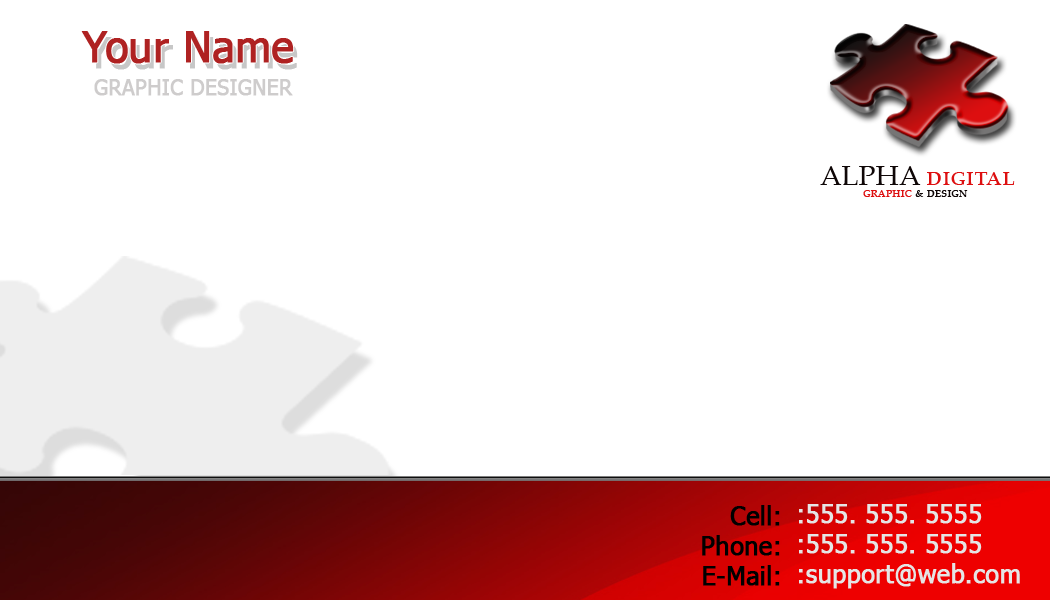
<style>
.page{position:relative;width:1050px;height:600px;background:#ffffff}
.page>*{position:absolute;margin:0}
.t1{font:41.7px "Tahoma";color:#af2222;font-weight:bold}
.t2{font:20.8px "Tahoma";color:#cecccc;font-weight:bold}
.t3{font:27.9px "PalatinoLinotype-Roman";color:#dd0f10;font-variant:small-caps}
.t4{font:27.9px "PalatinoLinotype-Roman";color:#0f0707;font-variant:small-caps}
.t5{font:14px "PalatinoLinotype-Roman";color:#0f0707;font-variant:small-caps}
.t6{font:14px "PalatinoLinotype-Roman";color:#dd0f10;font-variant:small-caps}
.t7{font:25px "Tahoma";color:#000000;font-weight:bold}
.t8{font:25px "Tahoma";color:#e5e5e5;font-weight:bold}
</style>
<div class="page">
<p class="t1" style="left:81px;top:31px;width:213px;height:33px">Your Name</p>
<p class="t2" style="left:94px;top:79px;width:199px;height:17px">GRAPHIC DESIGNER</p>
<p class="t3" style="left:820px;top:166px;width:195px;height:19px"><span class="t4">ALPHA </span>digital</p>
<p class="t5" style="left:863px;top:190px;width:105px;height:7px"><span class="t6">graphic </span>&amp; design</p>
<p class="t7" style="left:702px;top:505px;width:78px;height:81px;text-align:right">Cell:<br>Phone:<br>E-Mail:</p>
<p class="t8" style="left:799px;top:504px;width:221px;height:85px">:555. 555. 5555<br>:555. 555. 5555<br>:support@web.com</p>
</div>
